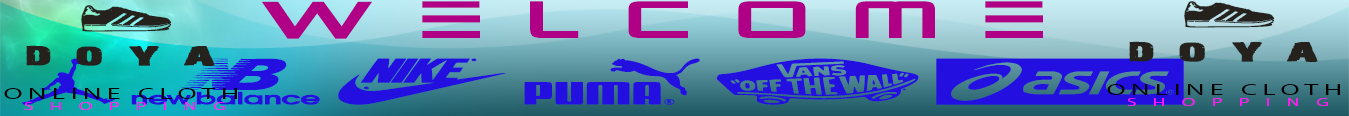
<style>
.page{position:relative;width:1349px;height:116px}
.page>*{position:absolute;margin:0}
.t1{font:63.2px "Alien-Resurrection-Regular";letter-spacing:0.85em;color:#b00085;scale:0.86 1}
.t2{font:84.9px "Radioland";letter-spacing:0.27em;color:#230fe0}
.t3{font:65.7px "Sneakers";letter-spacing:0.09em;color:#230fe0;scale:1.9 1}
.t4{font:25.1px/36.9px "28-Days-Later-Regular";letter-spacing:0.46em;color:#25221d;font-weight:bold;scale:2 1}
.t5{font:37px/13.9px "Sneakers";letter-spacing:-0.12em;color:#25221d;font-weight:bold;scale:1.38 1}
.t6{font:37px/13.9px "Sneakers";letter-spacing:0.02em;color:#25221d;font-weight:bold;scale:1.38 1}
.t7{font:15px "MyriadPro-Regular";letter-spacing:0.2em;color:#000000;scale:1.86 1}
.t8{font:11.7px "MyriadPro-Regular";letter-spacing:0.2em;color:#25221d;scale:1.86 1}
.t9{font:10.8px "MyriadPro-Regular";letter-spacing:0.8em;color:#ff16f3;scale:1.86 1}
.t10{font:5.4px "MyriadPro-Regular";letter-spacing:0.8em;color:#25221d;scale:1.86 1}
</style>
<div class="page">
<p class="t1" style="left:22px;top:1px;width:1162px;height:104px;text-align:center"><span class="t2"> </span>Welcome<br><span class="t3">NunaqI</span></p>
<p class="t4" style="left:26px;top:5px;width:189px;height:61px"><span class="t5">       </span><span class="t6">A<br></span>DOYA</p>
<p class="t4" style="left:1129px;top:1px;width:189px;height:61px"><span class="t5">       </span><span class="t6">A<br></span>DOYA</p>
<p class="t7" style="left:4px;top:88px;width:233px;height:11px"><span class="t8">              </span>ONLINE CLOTH</p>
<p class="t7" style="left:1107px;top:84px;width:233px;height:11px"><span class="t8">              </span>ONLINE CLOTH</p>
<p class="t9" style="left:24px;top:102px;width:201px;height:8px"><span class="t10">        </span>SHOPPING</p>
<p class="t9" style="left:1127px;top:98px;width:201px;height:8px"><span class="t10">        </span>SHOPPING</p>
</div>
